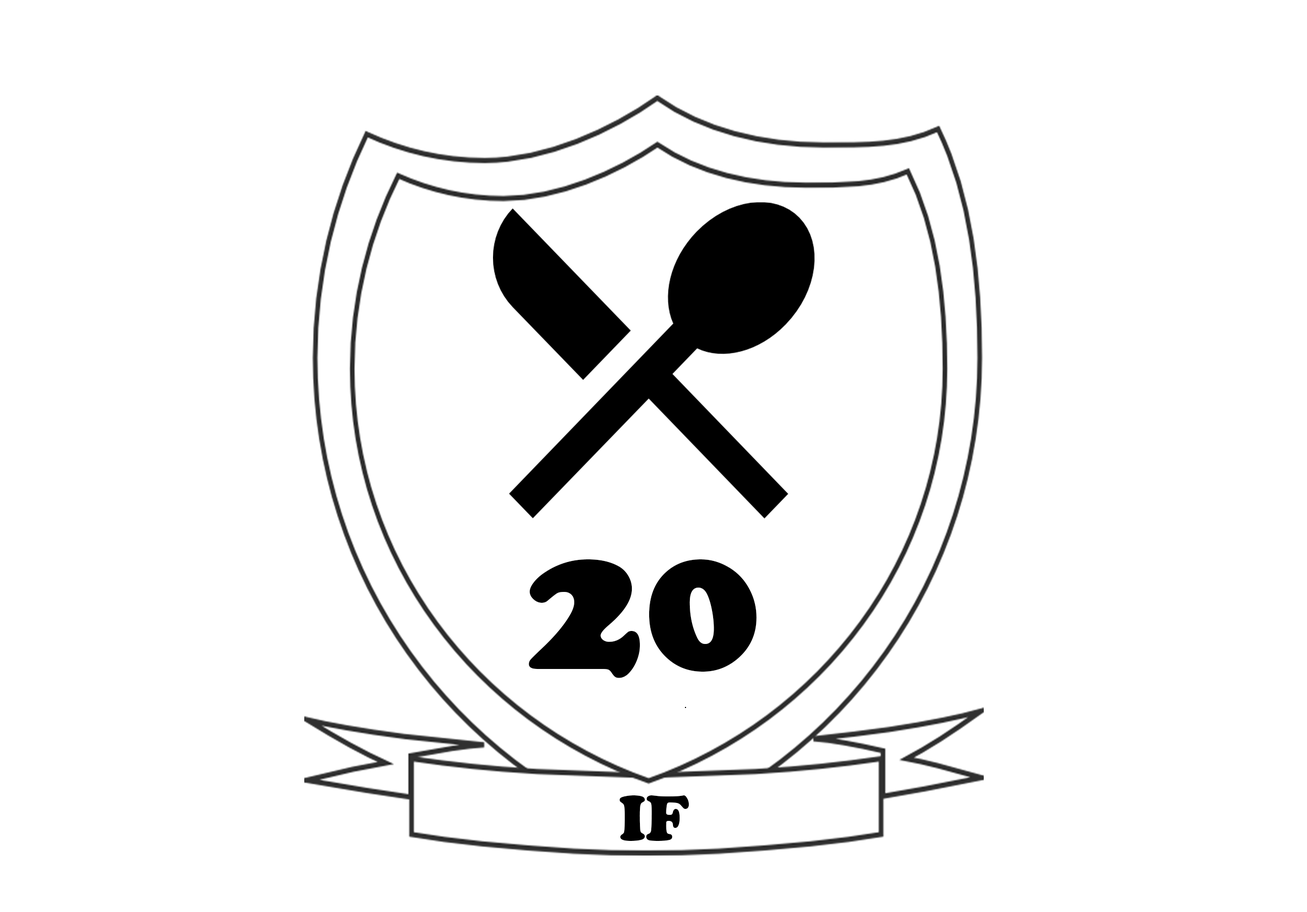
<style>
.page{position:relative;width:1307px;height:912px;background:#ffffff}
.page>*{position:absolute;margin:0}
.t1{font:195.3px "CooperBlack";color:#000000}
.t2{font:65.1px "CooperBlack";color:#000000}
</style>
<div class="page">
<p class="t1" style="left:529px;top:559px;width:228px;height:119px">20</p>
<p class="t2" style="left:620px;top:795px;width:70px;height:46px">IF</p>
</div>
